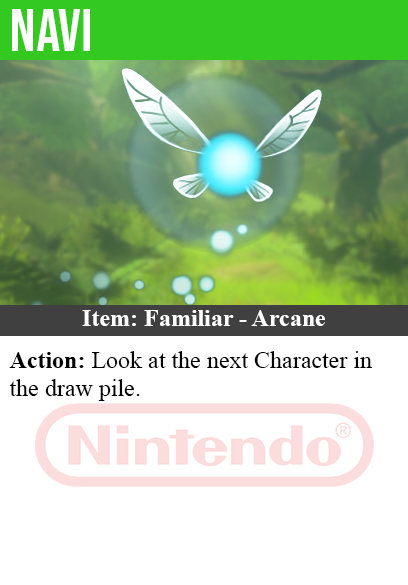
<style>
.page{position:relative;width:408px;height:585px;background:#ffffff}
.page>*{position:absolute;margin:0}
.t1{font:60px "BebasNeue-Regular";color:#ffffff}
.t2{font:24px "TimesNewRomanPS-BoldMT";color:#ffffff}
.t3{font:24px "TimesNewRomanPSMT";color:#000000}
.t4{font:24px "TimesNewRomanPS-BoldMT";color:#000000}
</style>
<div class="page">
<p class="t1" style="left:12px;top:9px;width:78px;height:42px">navi</p>
<p class="t2" style="left:82px;top:310px;width:243px;height:16px">Item: Familiar - Arcane</p>
<p class="t3" style="left:9px;top:351px;width:363px;height:50px"><span class="t4">Action:</span> Look at the next Character in<br>the draw pile.</p>
</div>
